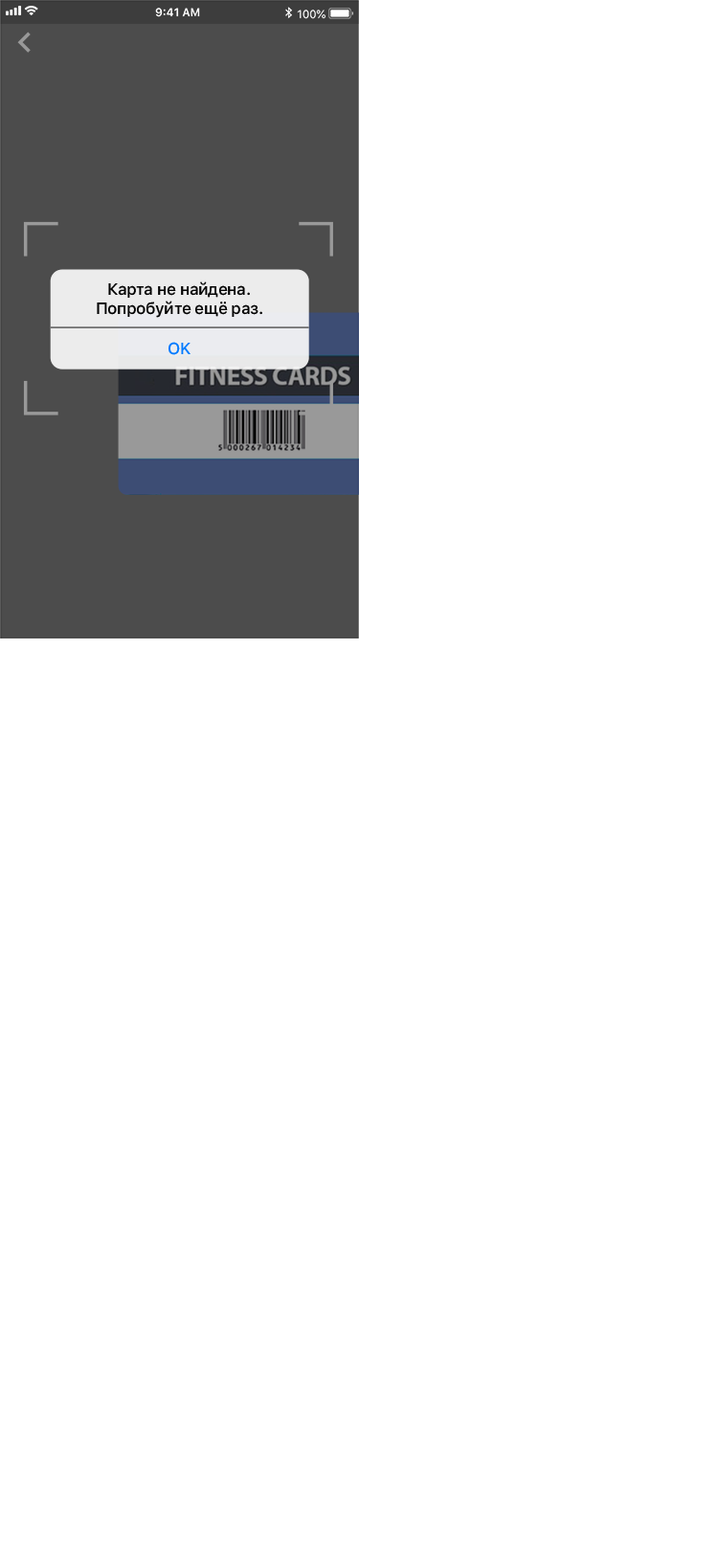
<style>
.page{position:relative;width:718px;height:1568px;background:#ffffff}
.page>*{position:absolute;margin:0}
.t1{font:16.3px "SFProText-Medium";letter-spacing:-0.024em;color:#030303}
.t2{font:16.3px "SFProText-Medium";letter-spacing:-0.024em;color:#007aff}
</style>
<div class="page">
<p class="t1" style="left:108px;top:281px;width:142px;height:17px">Карта не найдена.</p>
<p class="t1" style="left:97px;top:301px;width:165px;height:17px">Попробуйте ещё раз.</p>
<p class="t2" style="left:168px;top:342px;width:22px;height:13px">OK</p>
</div>
